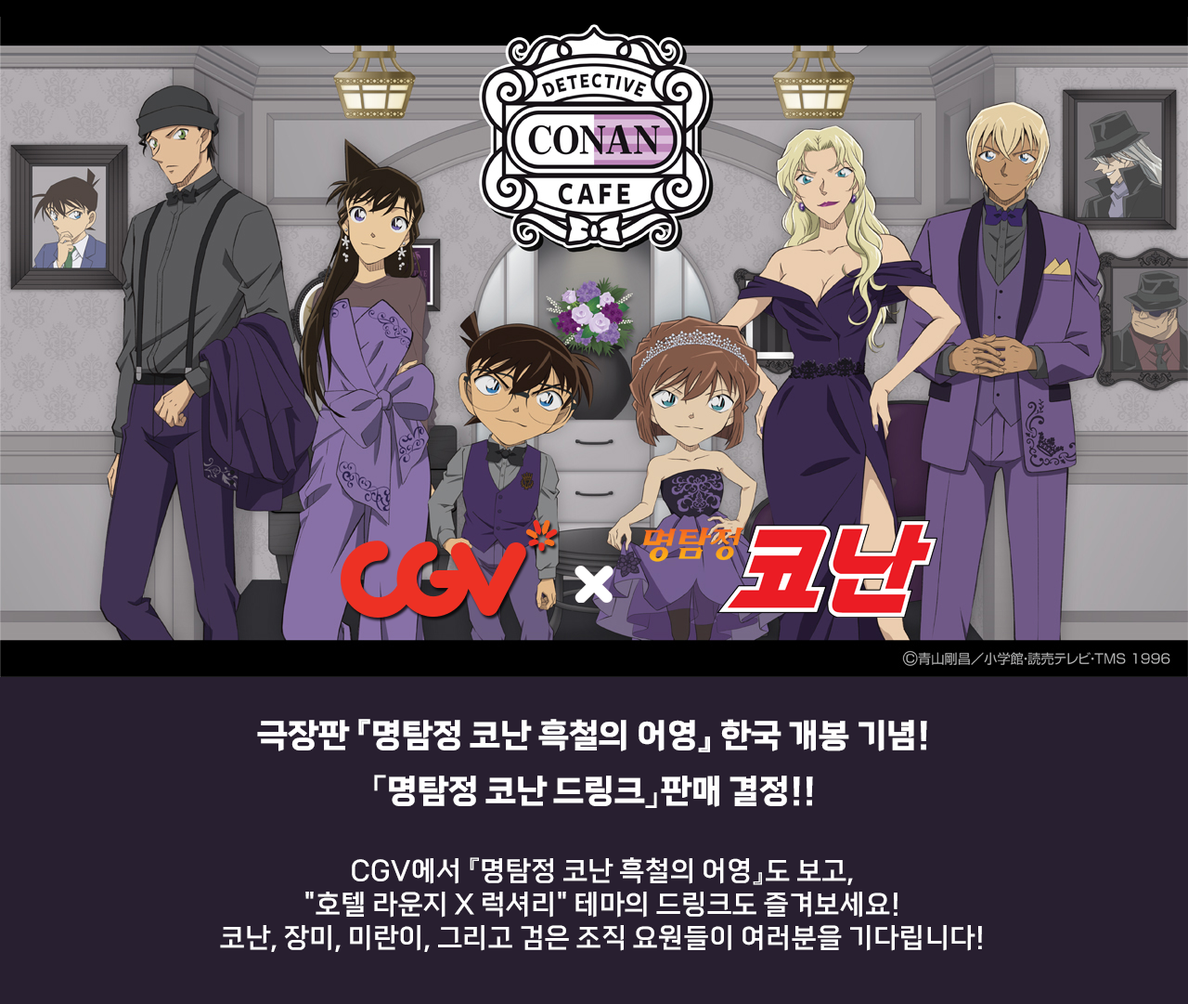
<style>
.page{position:relative;width:1188px;height:1004px;background:#281f30}
.page>*{position:absolute;margin:0}
.t1{font:33.4px/55.7px "TheJamsil5Bold";color:#ffffff}
.t2{font:27.8px/33.4px "TheJamsil3Regular";color:#ffffff}
</style>
<div class="page">
<p class="t1" style="left:257px;top:719px;width:670px;height:89px;text-align:center">극장판 『명탐정 코난 흑철의 어영』 한국 개봉 기념!<br>「명탐정 코난 드링크」판매 결정!!</p>
<p class="t2" style="left:220px;top:857px;width:762px;height:95px;text-align:center">CGV에서 『명탐정 코난 흑철의 어영』도 보고,<br>"호텔 라운지 X 럭셔리" 테마의 드링크도 즐겨보세요!<br>코난, 장미, 미란이, 그리고 검은 조직 요원들이 여러분을 기다립니다!</p>
</div>
